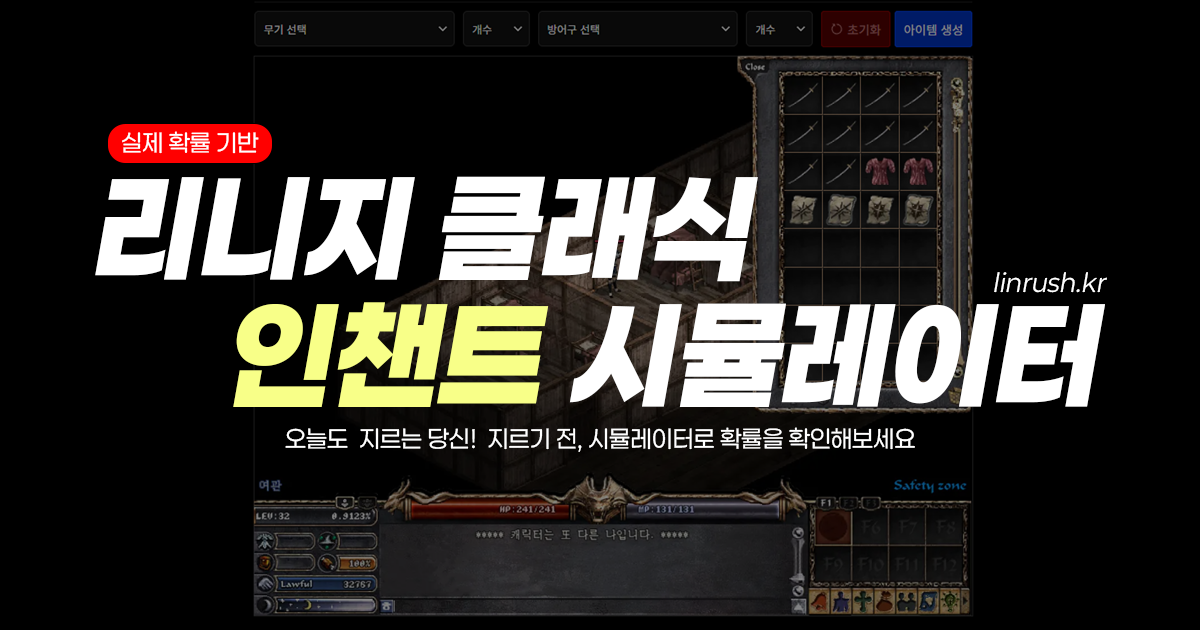
<style>
.page{position:relative;width:1200px;height:630px;background:#000000}
.page>*{position:absolute;margin:0}
.t1{font:24px "Paperlogy-4Regular";color:#ffffff}
.t2{font:120px "Paperlogy-9Black";color:#ffffff;font-style:italic}
.t3{font:24px "Paperlogy-4Regular";color:#ffffff;font-style:italic}
.t4{font:120px "Paperlogy-9Black";color:#f8ff88;font-style:italic}
</style>
<div class="page">
<p class="t1" style="left:122px;top:131px;width:137px;height:23px">실제 확률 기반</p>
<p class="t2" style="left:95px;top:176px;width:663px;height:106px">리니지 클래식</p>
<p class="t3" style="left:994px;top:272px;width:113px;height:21px">linrush.kr</p>
<p class="t2" style="left:233px;top:302px;width:872px;height:105px"><span class="t4">인챈트</span> 시뮬레이터</p>
<p class="t1" style="left:285px;top:427px;width:630px;height:25px">오늘도  지르는 당신!  지르기 전, 시뮬레이터로 확률을 확인해보세요</p>
</div>
